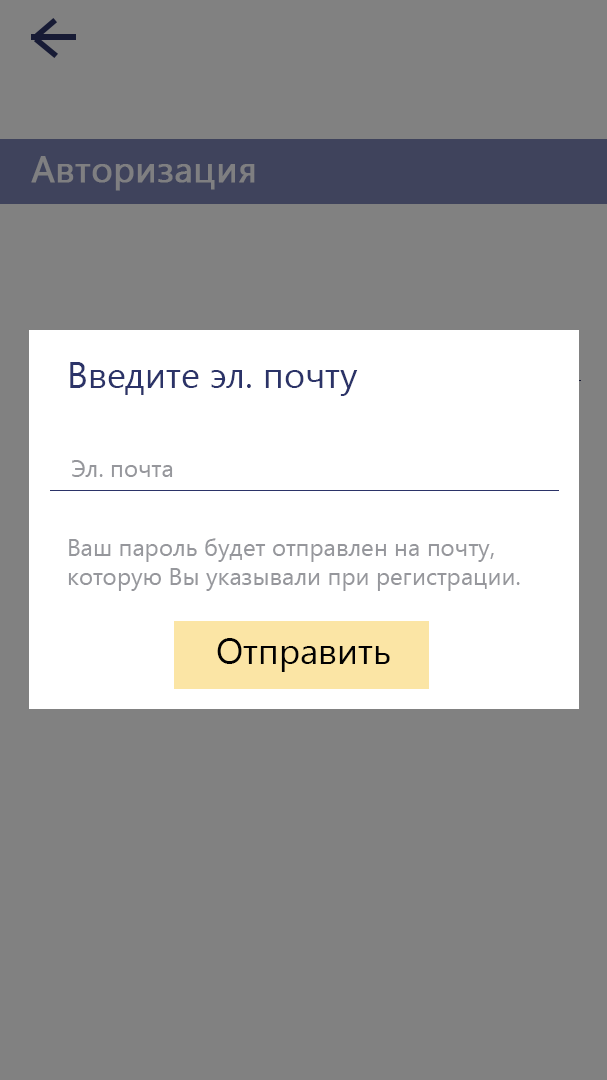
<style>
.page{position:relative;width:607px;height:1080px;background:#818181}
.page>*{position:absolute;margin:0}
.t1{font:36px "YuGothicUI-Regular";color:#7f7f81;font-weight:bold}
.t2{font:36px "YuGothicUI-Regular";color:#2b3368}
.t3{font:24px "YuGothicUI-Regular";color:#96979c}
.t4{font:36px "YuGothicUI-Regular";color:#010101}
</style>
<div class="page">
<p class="t1" style="left:31px;top:156px;width:224px;height:35px">Авторизация</p>
<p class="t2" style="left:70px;top:362px;width:288px;height:34px">Введите эл. почту</p>
<p class="t3" style="left:72px;top:460px;width:101px;height:17px">Эл. почта</p>
<p class="t3" style="left:68px;top:538px;width:452px;height:53px">Ваш пароль будет отправлен на почту,<br>которую Вы указывали при регистрации.</p>
<p class="t4" style="left:217px;top:638px;width:173px;height:34px">Отправить</p>
</div>
